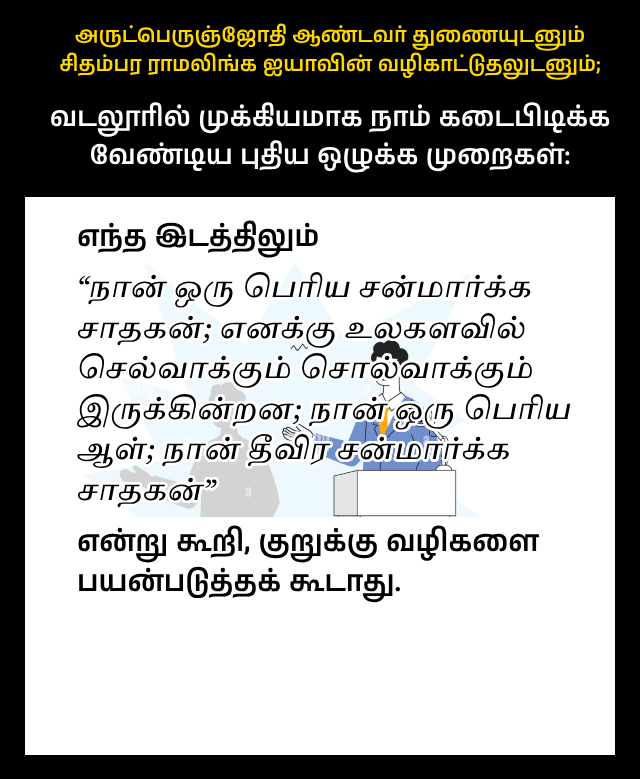
<style>
.page{position:relative;width:640px;height:779px;background:#ffffff}
.page>*{position:absolute;margin:0}
.t1{font:21px "AnekTamil-SemiBold";color:#ffd700}
.t2{font:27px "AnekTamil-SemiBold";color:#ffffff}
.t3{font:29px "TiroTamil-Italic";color:#000000}
.t4{font:29px "AnekTamil-SemiBold";color:#000000}
</style>
<div class="page">
<p class="t1" style="left:60px;top:23px;width:540px;height:57px;text-align:center">அருட்பெருஞ்ஜோதி ஆண்டவர் துணையுடனும் சிதம்பர ராமலிங்க ஐயாவின் வழிகாட்டுதலுடனும்;</p>
<p class="t2" style="left:51px;top:102px;width:559px;height:71px;text-align:center">வடலூரில் முக்கியமாக நாம் கடைபிடிக்க வேண்டிய புதிய ஒழுக்க முறைகள்:</p>
<p class="t3" style="left:77px;top:220px;width:494px;height:383px"><span class="t4">எந்த இடத்திலும் <br></span>“நான் ஒரு பெரிய சன்மார்க்க சாதகன்; எனக்கு உலகளவில் செல்வாக்கும் சொல்வாக்கும் இருக்கின்றன; நான் ஒரு பெரிய ஆள்; நான் தீவிர சன்மார்க்க சாதகன்”                            <br><span class="t4">என்று கூறி, குறுக்கு வழிகளை பயன்படுத்தக் கூடாது.</span></p>
</div>
